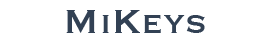
<style>
.page{position:relative;width:270px;height:40px;background:#ffffff}
.page>*{position:absolute;margin:0}
.t1{font:40px "Copperplate";color:#324154}
.t2{font:43px "Copperplate";color:#324154}
</style>
<div class="page">
<p class="t1" style="left:66px;top:10px;width:139px;height:23px"><span class="t2">M</span>i<span class="t2">K</span>eys</p>
</div>
